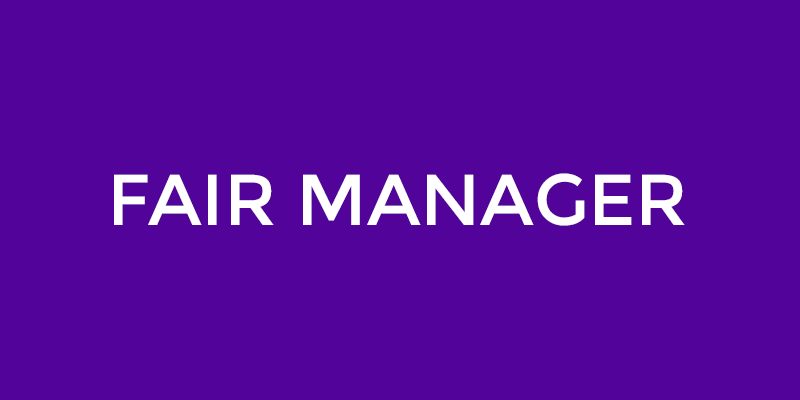
<style>
.page{position:relative;width:800px;height:400px;background:#51039a}
.page>*{position:absolute;margin:0}
.t1{font:72px "Montserrat-Regular";color:#ffffff}
</style>
<div class="page">
<p class="t1" style="left:114px;top:173px;width:571px;height:53px">FAIR MANAGER</p>
</div>
